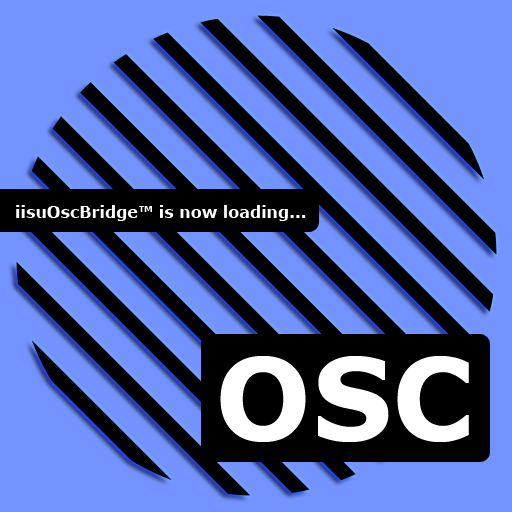
<style>
.page{position:relative;width:512px;height:512px;background:#7393ff}
.page>*{position:absolute;margin:0}
.t1{font:16px "Verdana-Bold";color:#ffffff}
.t2{font:113.3px "Verdana-Bold";color:#ffffff}
</style>
<div class="page">
<p class="t1" style="left:16px;top:205px;width:290px;height:16px">iisuOscBridge™ is now loading...</p>
<p class="t2" style="left:220px;top:356px;width:249px;height:86px">OSC</p>
</div>
